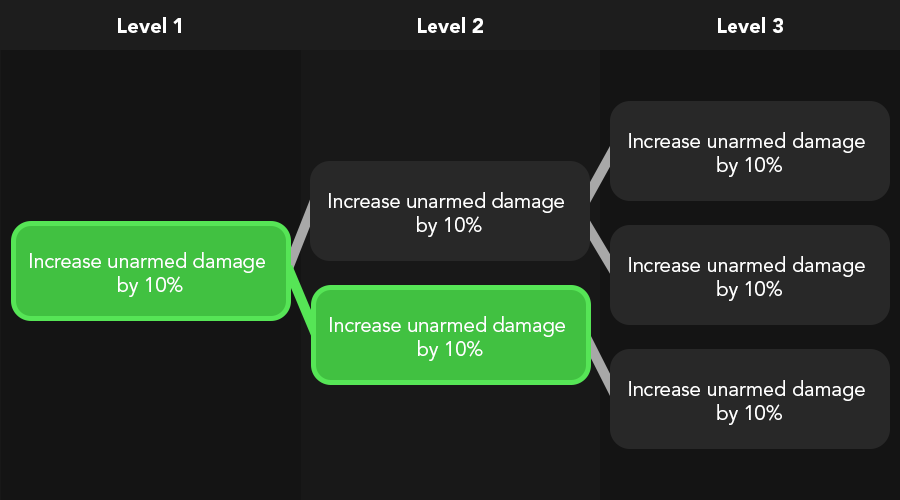
<style>
.page{position:relative;width:900px;height:500px;background:#141414}
.page>*{position:absolute;margin:0}
.t1{font:20px "AvenirLTStd-Black";color:#ffffff}
.t2{font:20px "AvenirLTStd-Book";color:#ffffff}
</style>
<div class="page">
<p class="t1" style="left:118px;top:17px;width:63px;height:16px">Level 1</p>
<p class="t1" style="left:418px;top:17px;width:65px;height:16px">Level 2</p>
<p class="t1" style="left:718px;top:17px;width:65px;height:16px">Level 3</p>
<p class="t2" style="left:629px;top:132px;width:236px;height:45px;text-align:center">Increase unarmed damage <br>by 10%</p>
<p class="t2" style="left:329px;top:192px;width:235px;height:45px;text-align:center">Increase unarmed damage <br>by 10%</p>
<p class="t2" style="left:30px;top:252px;width:235px;height:45px;text-align:center">Increase unarmed damage <br>by 10%</p>
<p class="t2" style="left:629px;top:256px;width:236px;height:45px;text-align:center">Increase unarmed damage <br>by 10%</p>
<p class="t2" style="left:330px;top:316px;width:235px;height:45px;text-align:center">Increase unarmed damage <br>by 10%</p>
<p class="t2" style="left:629px;top:380px;width:236px;height:45px;text-align:center">Increase unarmed damage <br>by 10%</p>
</div>
